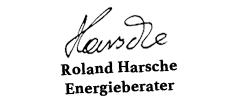
<style>
.page{position:relative;width:250px;height:112px;background:#ffffff}
.page>*{position:absolute;margin:0}
.t1{font:16px "Athelas-Bold";color:#000000;font-weight:bold}
.t2{font:16px "Athelas-Bold";color:#000000;text-transform:uppercase;font-weight:bold}
</style>
<div class="page">
<p class="t1" style="left:60px;top:59px;width:117px;height:37px;text-align:center;rotate:-2deg"><span class="t2">R</span>oland Harsche<br>Energieberater</p>
</div>
